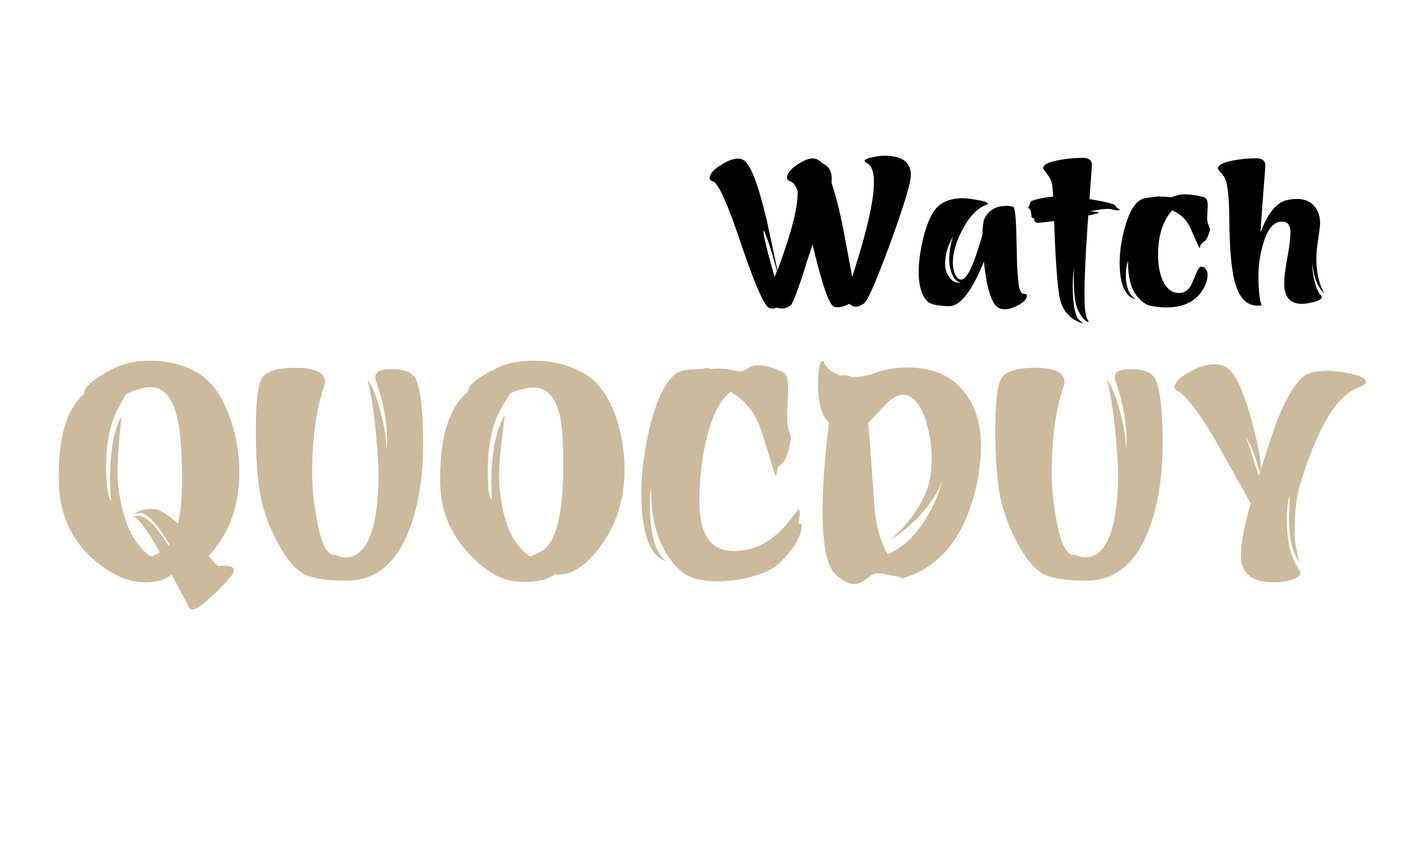
<style>
.page{position:relative;width:1414px;height:843px;background:#ffffff}
.page>*{position:absolute;margin:0}
.t1{font:234.3px "UTM-Azuki";color:#000000}
.t2{font:337.3px "UTM-Azuki";color:#cbba9c}
</style>
<div class="page">
<p class="t1" style="left:710px;top:156px;width:615px;height:168px">Watch</p>
<p class="t2" style="left:58px;top:361px;width:1309px;height:249px">QUOCDUY</p>
</div>
